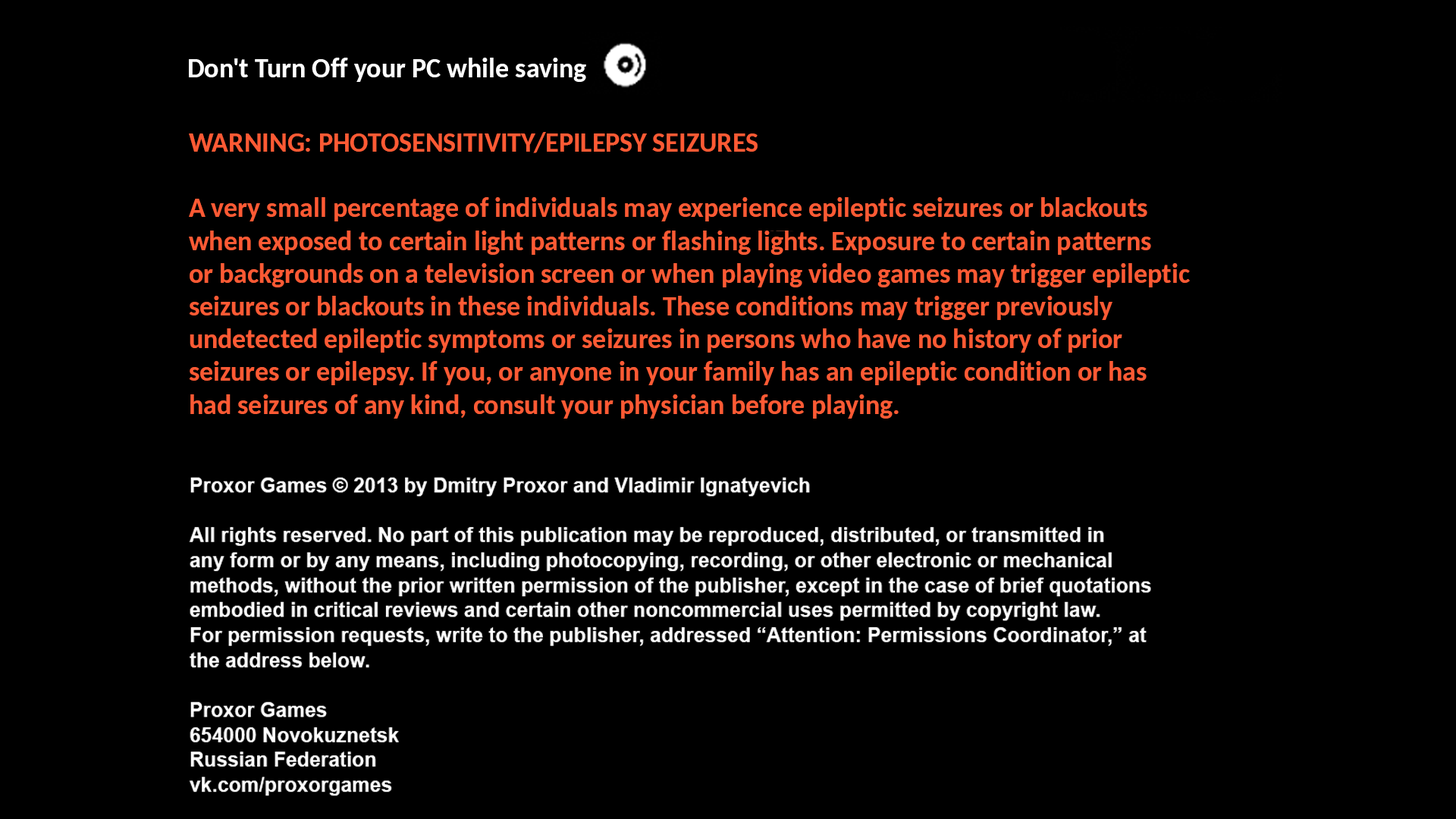
<style>
.page{position:relative;width:1456px;height:819px;background:#000000}
.page>*{position:absolute;margin:0}
.t1{font:27.3px "Carlito-Bold";color:#ffffff}
.t2{font:27.3px "Carlito-Bold";color:#fe5a34}
</style>
<div class="page">
<p class="t1" style="left:189px;top:58px;width:397px;height:24px">Don't Turn Off your PC while saving</p>
<p class="t2" style="left:189px;top:132px;width:1001px;height:287px">WARNING: PHOTOSENSITIVITY/EPILEPSY SEIZURES<br><br>A very small percentage of individuals may experience epileptic seizures or blackouts <br>when exposed to certain light patterns or flashing lights. Exposure to certain patterns <br>or backgrounds on a television screen or when playing video games may trigger epileptic <br>seizures or blackouts in these individuals. These conditions may trigger previously <br>undetected epileptic symptoms or seizures in persons who have no history of prior <br>seizures or epilepsy. If you, or anyone in your family has an epileptic condition or has <br>had seizures of any kind, consult your physician before playing.</p>
</div>
